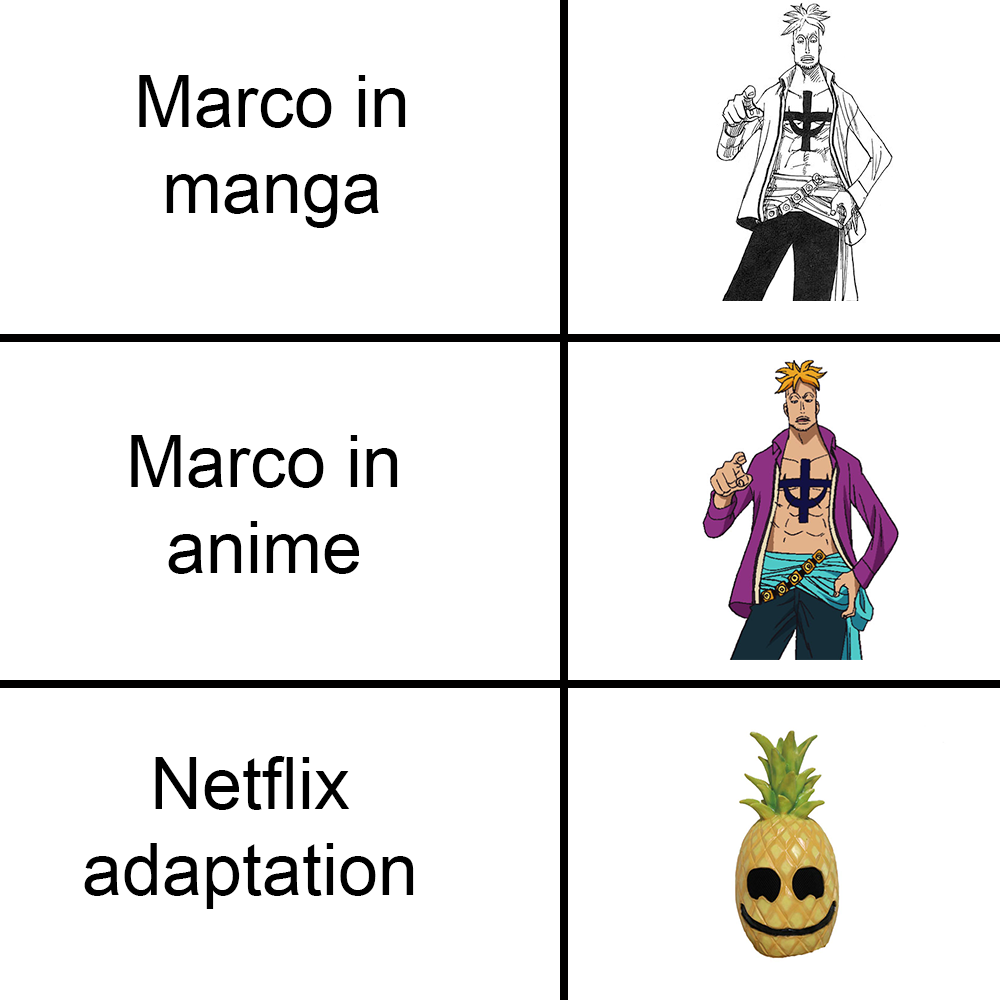
<style>
.page{position:relative;width:1000px;height:1000px;background:#ffffff}
.page>*{position:absolute;margin:0}
.t1{font:72px "ArialMT";color:#000000}
</style>
<div class="page">
<p class="t1" style="left:139px;top:75px;width:267px;height:153px;text-align:center">Marco in <br>manga</p>
<p class="t1" style="left:131px;top:435px;width:267px;height:139px;text-align:center">Marco in anime</p>
<p class="t1" style="left:84px;top:756px;width:330px;height:153px;text-align:center">Netflix adaptation</p>
</div>
